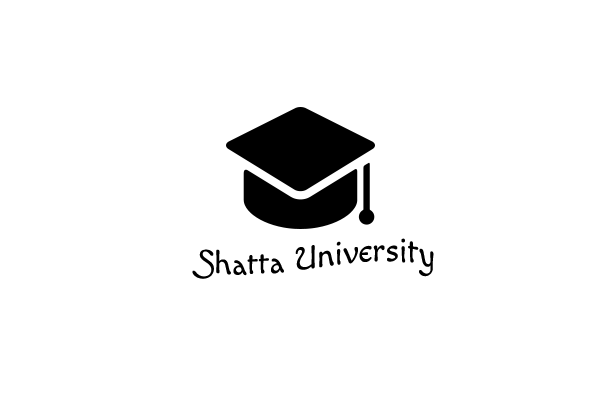
<style>
.page{position:relative;width:600px;height:400px;background:#ffffff}
.page>*{position:absolute;margin:0}
.t1{font:33.3px "MacondoSwashCaps-Regular";color:#000000}
</style>
<div class="page">
<p class="t1" style="left:192px;top:238px;width:242px;height:41px">Shatta University</p>
</div>
